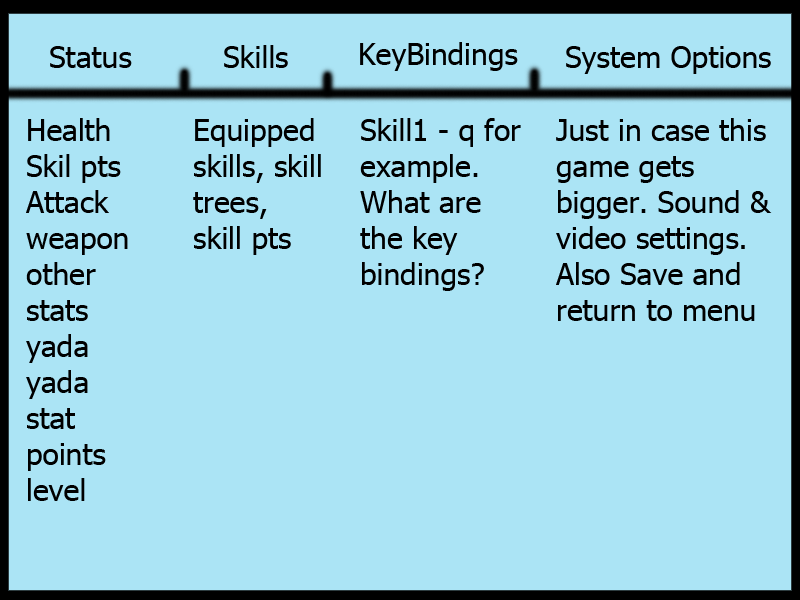
<style>
.page{position:relative;width:800px;height:600px;background:#abe4f5}
.page>*{position:absolute;margin:0}
.t1{font:30px "Tahoma";color:#000000}
</style>
<div class="page">
<p class="t1" style="left:50px;top:46px;width:82px;height:22px">Status</p>
<p class="t1" style="left:224px;top:45px;width:64px;height:23px">Skills</p>
<p class="t1" style="left:360px;top:42px;width:158px;height:29px">KeyBindings</p>
<p class="t1" style="left:566px;top:46px;width:205px;height:28px">System Options</p>
<p class="t1" style="left:26px;top:118px;width:102px;height:383px">Health<br>Skil pts<br>Attack<br>weapon<br>other stats yada yada<br>stat points<br>level</p>
<p class="t1" style="left:193px;top:118px;width:128px;height:137px">Equipped skills, skill trees, skill pts</p>
<p class="t1" style="left:360px;top:118px;width:161px;height:173px">Skill1 - q for example. What are the key bindings?</p>
<p class="t1" style="left:556px;top:118px;width:216px;height:203px">Just in case this game gets bigger. Sound &amp; video settings. Also Save and return to menu</p>
</div>
